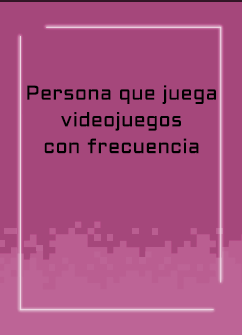
<style>
.page{position:relative;width:242px;height:335px;background:#a5477b}
.page>*{position:absolute;margin:0}
.t1{font:20px/26.7px "Aldrich-Regular";letter-spacing:0.015em;color:#000000}
</style>
<div class="page">
<p class="t1" style="left:27px;top:85px;width:189px;height:69px;text-align:center">Persona que juega<br>videojuegos<br>con frecuencia</p>
</div>
